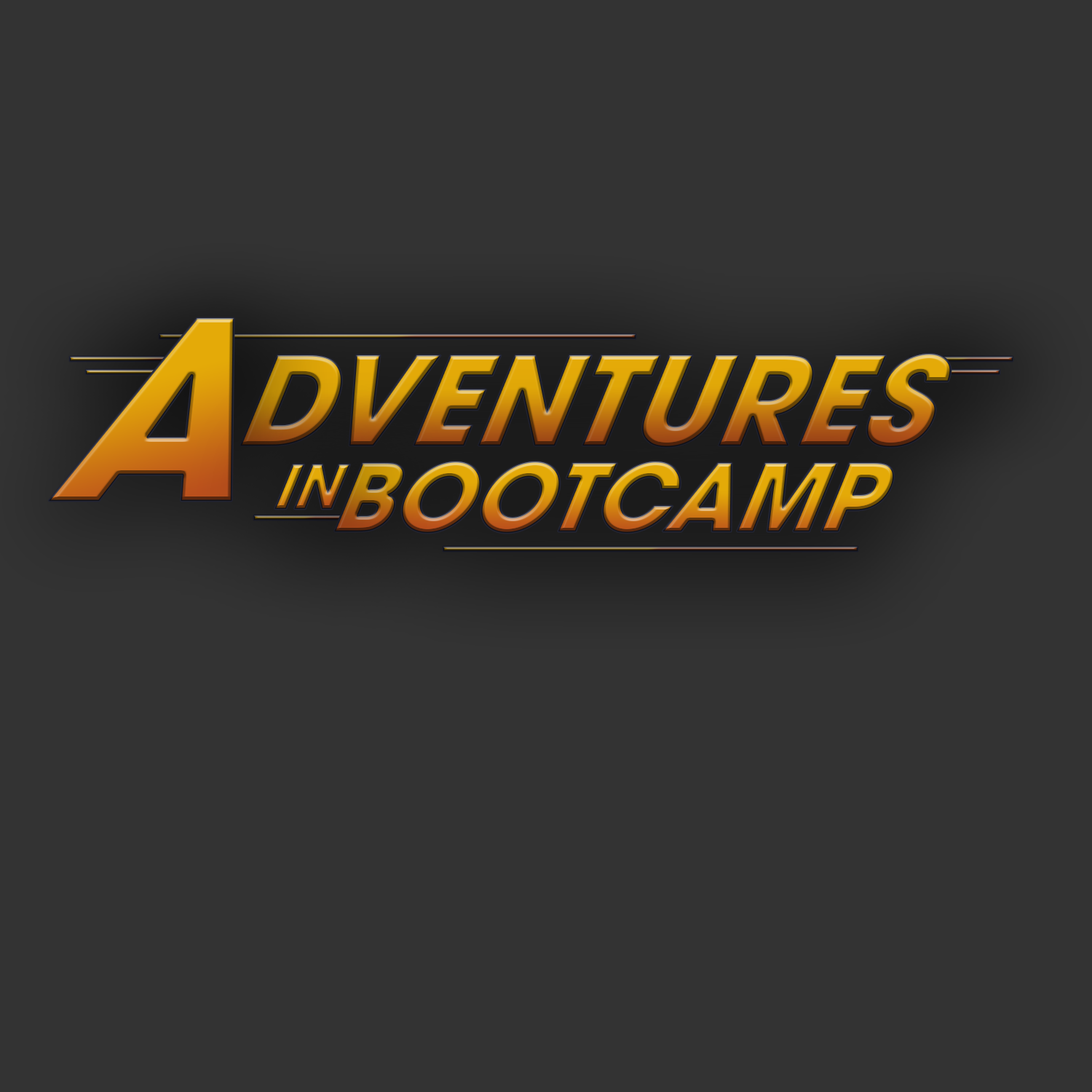
<style>
.page{position:relative;width:1092px;height:1092px;background:#333333}
.page>*{position:absolute;margin:0}
.t1{font:266.9px "ITCAvantGardePro-Bold";text-transform:uppercase;scale:0.93 1}
.t2{font:131.9px "ITCAvantGardePro-Bold";text-transform:uppercase;scale:0.93 1}
.t3{font:99.8px "ITCAvantGardePro-Bold";text-transform:uppercase;scale:0.93 1}
.t4{font:64.4px "ITCAvantGardePro-Bold";text-transform:uppercase;scale:0.93 1}
</style>
<div class="page">
<p class="t1" style="left:49px;top:318px;width:185px;height:183px">A</p>
<p class="t2" style="left:240px;top:354px;width:711px;height:93px">Dventures</p>
<p class="t3" style="left:334px;top:462px;width:560px;height:71px">bootcamp</p>
<p class="t4" style="left:274px;top:464px;width:76px;height:45px">in</p>
</div>
